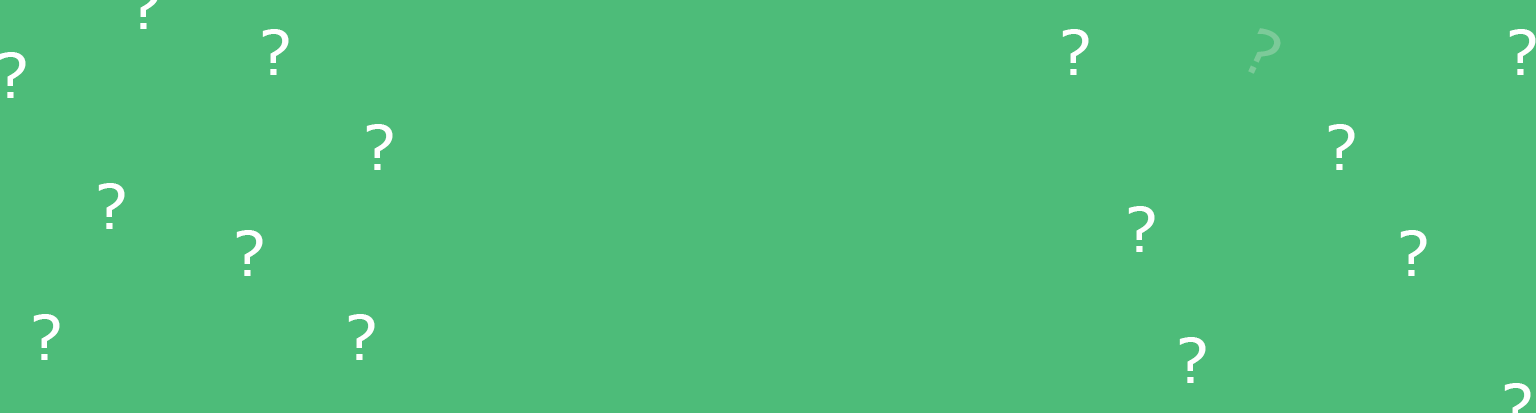
<style>
.page{position:relative;width:1536px;height:413px;background:#4dbc79}
.page>*{position:absolute;margin:0}
.t1{font:62px "MSReferenceSansSerif";color:#ffffff}
.t2{font:62px "MSReferenceSansSerif";color:#7cca99}
</style>
<div class="page">
<p class="t1" style="left:262px;top:29px;width:27px;height:46px">?</p>
<p class="t1" style="left:1062px;top:29px;width:27px;height:46px">?</p>
<p class="t2" style="left:1248px;top:28px;width:33px;height:46px;rotate:25deg">?</p>
<p class="t1" style="left:1509px;top:29px;width:27px;height:46px">?</p>
<p class="t1" style="left:0px;top:52px;width:26px;height:46px">?</p>
<p class="t1" style="left:366px;top:124px;width:27px;height:46px">?</p>
<p class="t1" style="left:1328px;top:124px;width:27px;height:46px">?</p>
<p class="t1" style="left:98px;top:183px;width:27px;height:46px">?</p>
<p class="t1" style="left:1128px;top:206px;width:27px;height:46px">?</p>
<p class="t1" style="left:236px;top:230px;width:27px;height:46px">?</p>
<p class="t1" style="left:1400px;top:230px;width:27px;height:46px">?</p>
<p class="t1" style="left:33px;top:314px;width:27px;height:46px">?</p>
<p class="t1" style="left:348px;top:314px;width:27px;height:46px">?</p>
<p class="t1" style="left:1179px;top:337px;width:27px;height:46px">?</p>
</div>
